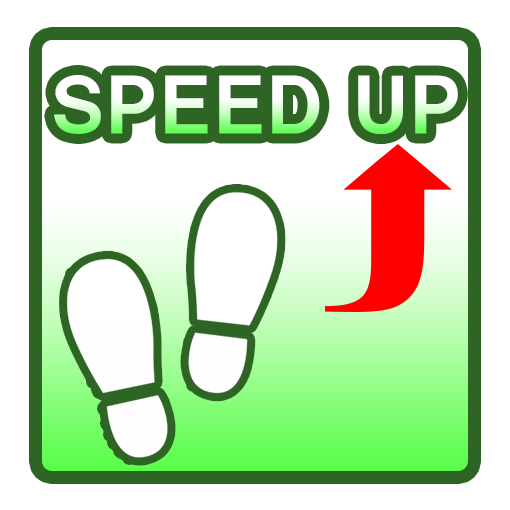
<style>
.page{position:relative;width:510px;height:510px;background:#ffffff}
.page>*{position:absolute;margin:0}
.t1{font:72px "HGPSoeiKakugothicUB";letter-spacing:0.05em}
</style>
<div class="page">
<p class="t1" style="left:54px;top:75px;width:404px;height:59px">ＳＰＥＥＤ ＵＰ</p>
</div>
